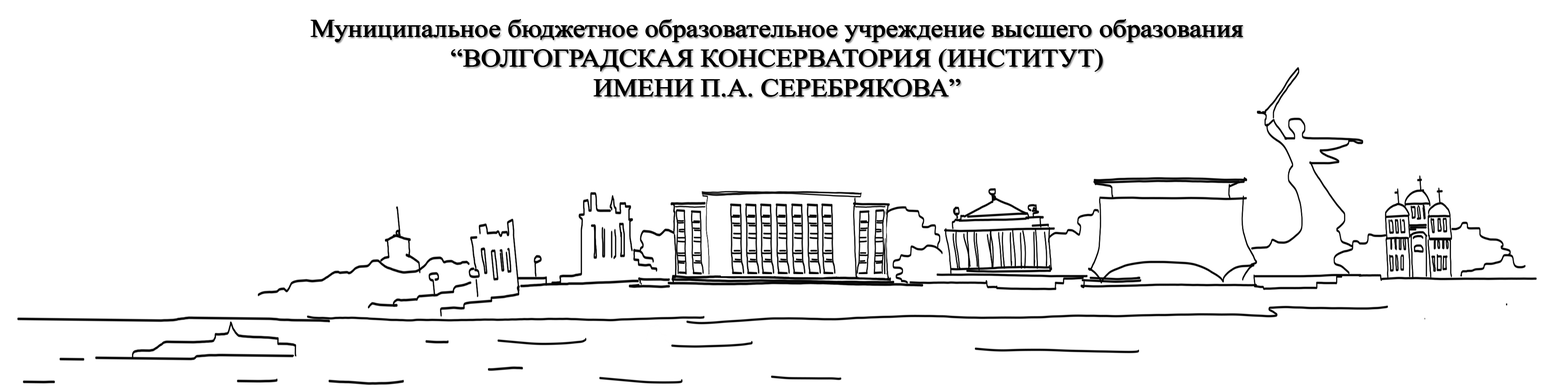
<style>
.page{position:relative;width:1568px;height:392px;background:#ffffff}
.page>*{position:absolute;margin:0}
.t1{font:24.9px "TimesNewRomanPSMT";color:#000000;scale:1.1 1}
</style>
<div class="page">
<p class="t1" style="left:311px;top:19px;width:932px;height:77px;text-align:center">Муниципальное бюджетное образовательное учреждение высшего образования<br>“ВОЛГОГРАДСКАЯ КОНСЕРВАТОРИЯ (ИНСТИТУТ)<br>ИМЕНИ П.А. СЕРЕБРЯКОВА”</p>
</div>
